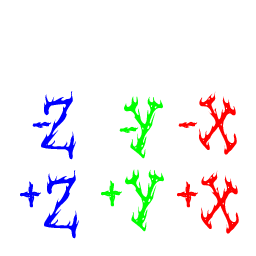
<style>
.page{position:relative;width:256px;height:256px;background:#ffffff}
.page>*{position:absolute;margin:0}
.t1{font:78.3px "SeaweedFireAOE";color:#0000ff}
.t2{font:78.3px "SeaweedFireAOE";color:#00ff00}
.t3{font:78.3px "SeaweedFireAOE";color:#ff0000}
.t4{font:78.3px "SeaweedFireAOE";color:#fe0000}
</style>
<div class="page">
<p class="t1" style="left:32px;top:91px;width:44px;height:69px">-Z</p>
<p class="t2" style="left:119px;top:96px;width:44px;height:63px">-Y</p>
<p class="t3" style="left:178px;top:91px;width:59px;height:64px">-X</p>
<p class="t1" style="left:20px;top:170px;width:59px;height:69px">+Z</p>
<p class="t2" style="left:101px;top:169px;width:63px;height:63px">+Y</p>
<p class="t4" style="left:177px;top:170px;width:62px;height:64px">+X</p>
</div>
